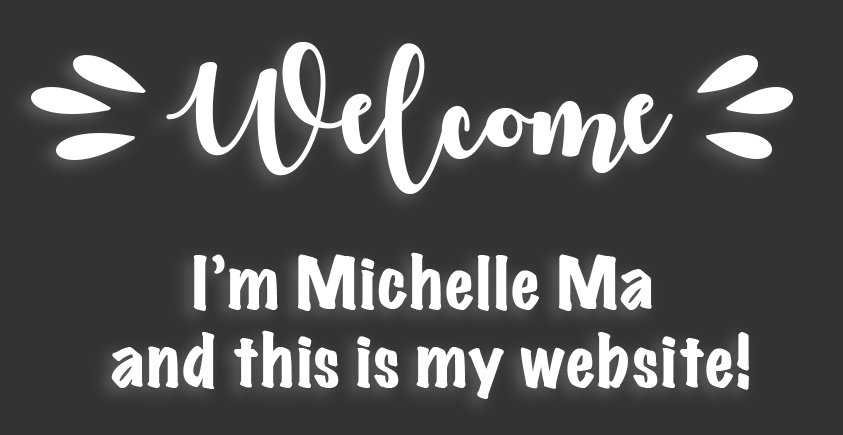
<style>
.page{position:relative;width:843px;height:435px;background:#333333}
.page>*{position:absolute;margin:0}
.t1{font:120px "AutumninNovember";color:#ffffff}
.t2{font:65px "MarkerFelt-Wide";color:#ffffff}
</style>
<div class="page">
<p class="t1" style="left:166px;top:42px;width:507px;height:152px">Welcome</p>
<p class="t2" style="left:111px;top:252px;width:638px;height:147px;text-align:center">I’m Michelle Ma <br>and this is my website!</p>
</div>
